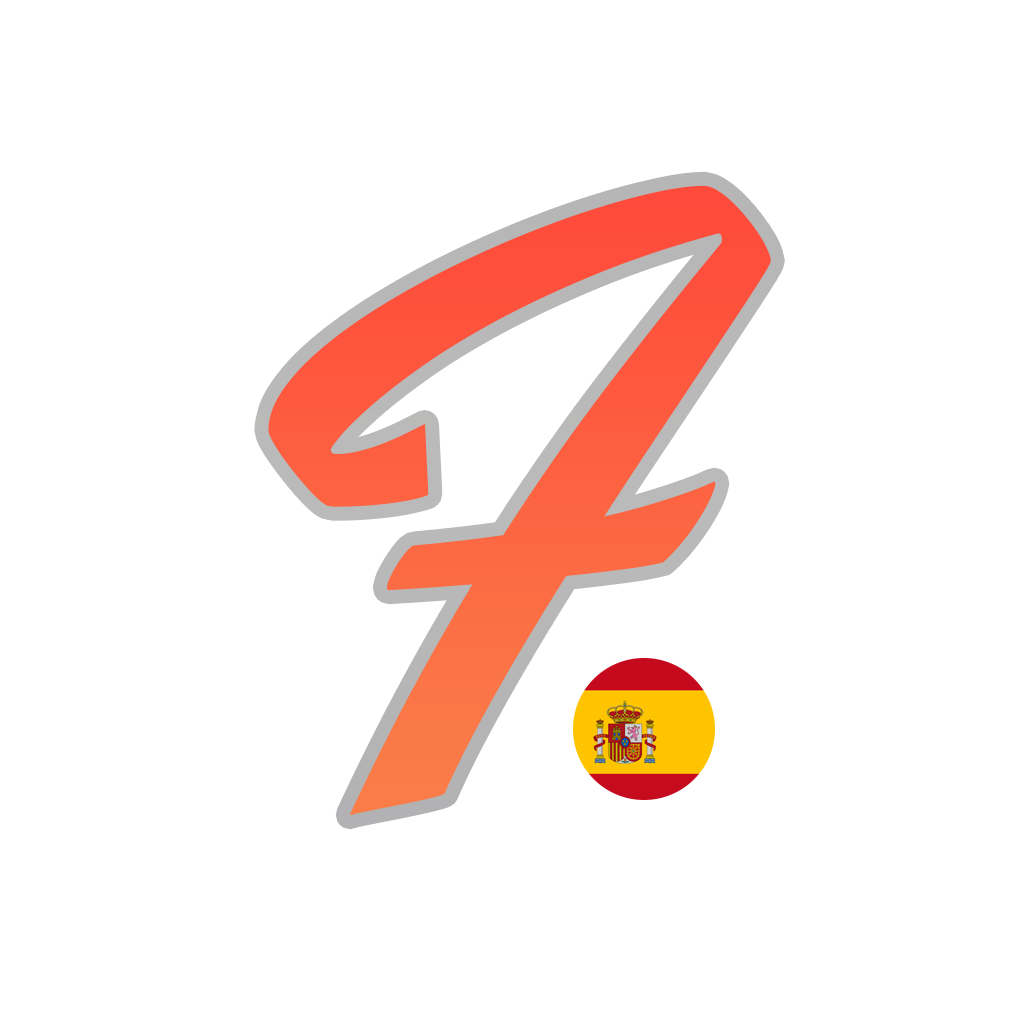
<style>
.page{position:relative;width:1024px;height:1024px;background:#ffffff}
.page>*{position:absolute;margin:0}
.t1{font:656.9px "Yesteryear-Regular";letter-spacing:-0.04em;color:#fd5e40}
</style>
<div class="page">
<p class="t1" style="left:268px;top:185px;width:503px;height:631px">F</p>
</div>
